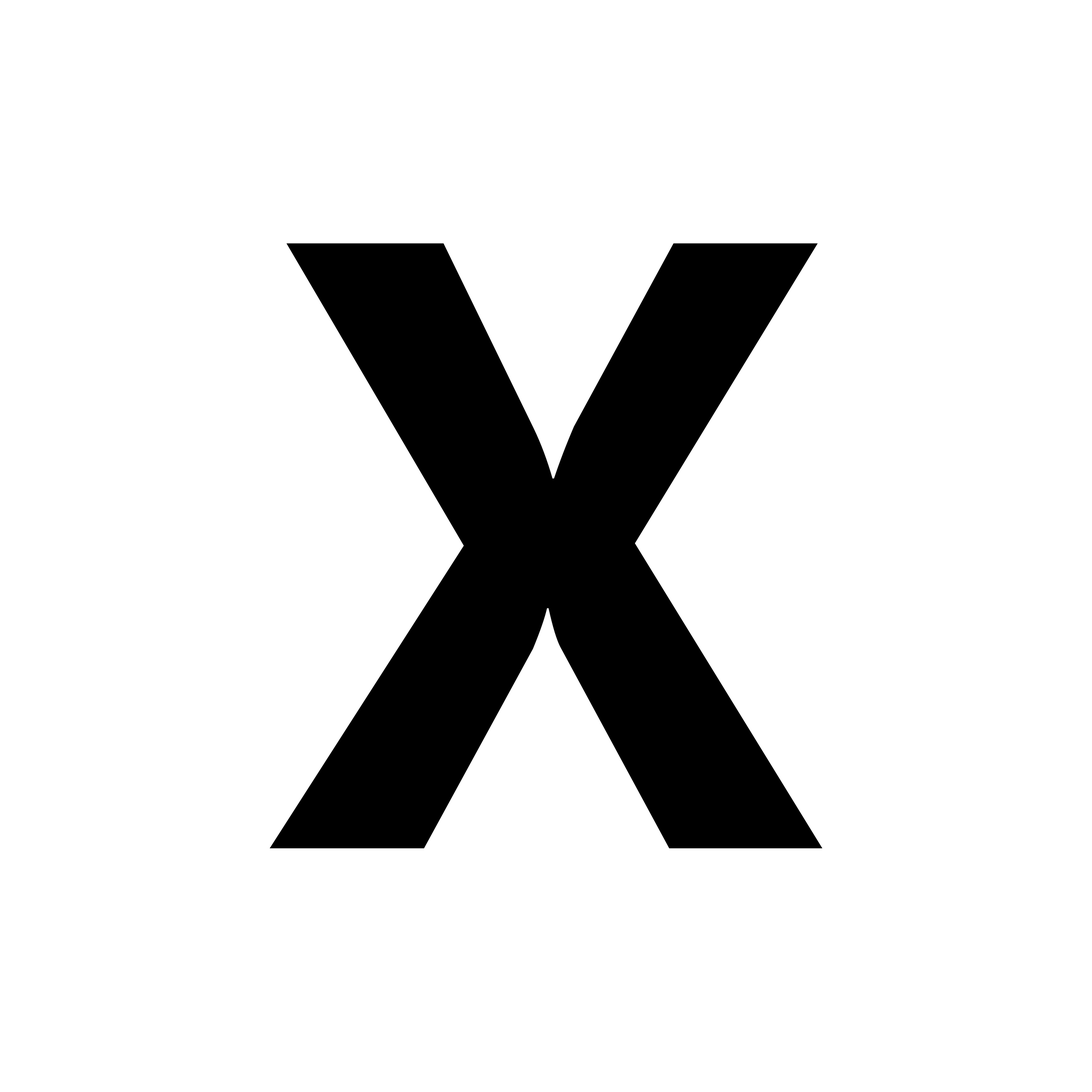
<style>
.page{position:relative;width:1092px;height:1092px;background:#ffffff}
.page>*{position:absolute;margin:0}
.t1{font:799.7px "MicrosoftYaHei-Bold";letter-spacing:0.05em;color:#000000}
</style>
<div class="page">
<p class="t1" style="left:269px;top:243px;width:554px;height:605px">X</p>
</div>
